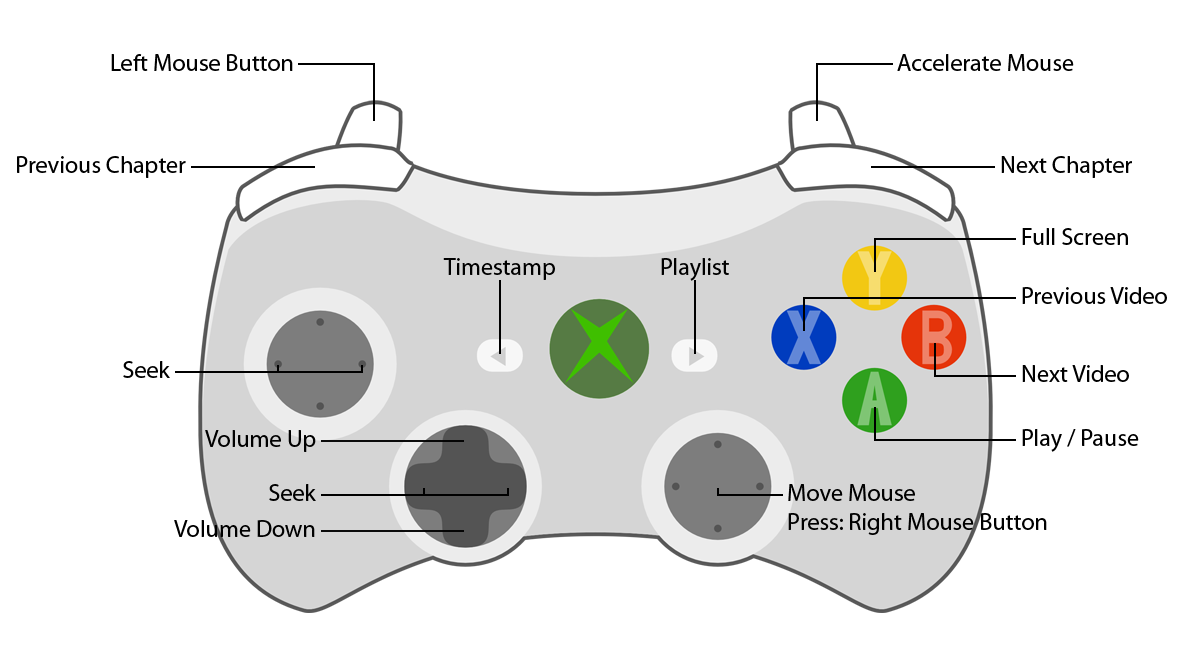
<style>
.page{position:relative;width:1186px;height:648px;background:#ffffff}
.page>*{position:absolute;margin:0}
.t1{font:24px "MyriadPro-Regular";color:#000000}
</style>
<div class="page">
<p class="t1" style="left:111px;top:54px;width:182px;height:17px">Left Mouse Button</p>
<p class="t1" style="left:897px;top:54px;width:177px;height:17px">Accelerate Mouse</p>
<p class="t1" style="left:17px;top:156px;width:169px;height:22px">Previous Chapter</p>
<p class="t1" style="left:1001px;top:156px;width:131px;height:22px">Next Chapter</p>
<p class="t1" style="left:1022px;top:228px;width:106px;height:17px">Full Screen</p>
<p class="t1" style="left:443px;top:258px;width:112px;height:22px">Timestamp</p>
<p class="t1" style="left:661px;top:258px;width:68px;height:23px">Playlist</p>
<p class="t1" style="left:1022px;top:287px;width:145px;height:17px">Previous Video</p>
<p class="t1" style="left:123px;top:361px;width:47px;height:17px">Seek</p>
<p class="t1" style="left:1022px;top:365px;width:107px;height:17px">Next Video</p>
<p class="t1" style="left:205px;top:430px;width:111px;height:22px">Volume Up</p>
<p class="t1" style="left:1022px;top:429px;width:117px;height:23px">Play / Pause</p>
<p class="t1" style="left:269px;top:484px;width:47px;height:17px">Seek</p>
<p class="t1" style="left:788px;top:484px;width:259px;height:51px">Move Mouse<br>Press: Right Mouse Button</p>
<p class="t1" style="left:174px;top:520px;width:141px;height:17px">Volume Down</p>
</div>
